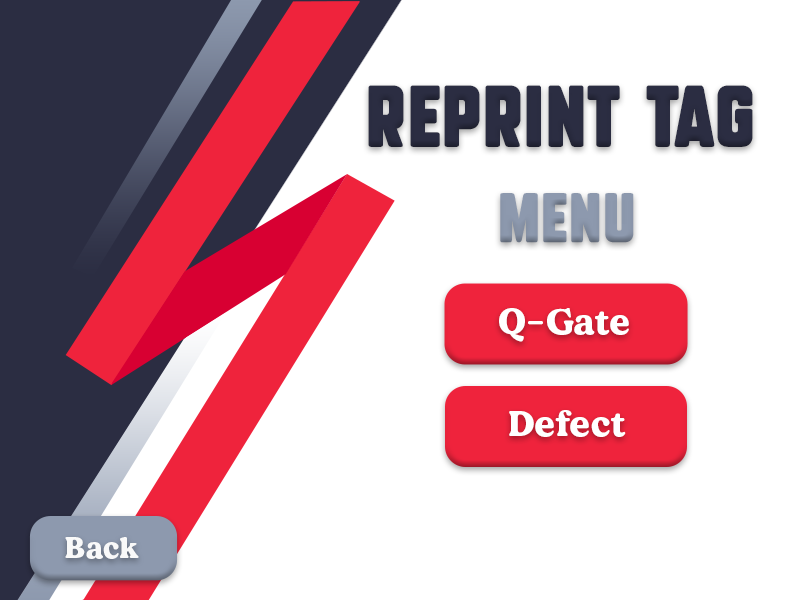
<style>
.page{position:relative;width:800px;height:600px;background:#ffffff}
.page>*{position:absolute;margin:0}
.t1{font:60px "SubtleCurves";letter-spacing:0.025em;color:#2b2d42}
.t2{font:48px "SubtleCurves";letter-spacing:0.025em;color:#8d99ae}
.t3{font:36px "MADEDillan";letter-spacing:0.025em;color:#ffffff}
.t4{font:30px "MADEDillan";letter-spacing:0.025em;color:#f9f9f9}
</style>
<div class="page">
<p class="t1" style="left:368px;top:85px;width:385px;height:62px">reprint tag</p>
<p class="t2" style="left:500px;top:193px;width:134px;height:50px">Menu</p>
<p class="t3" style="left:499px;top:308px;width:130px;height:34px">Q-Gate</p>
<p class="t3" style="left:509px;top:410px;width:117px;height:27px">Defect</p>
<p class="t4" style="left:65px;top:537px;width:74px;height:22px">Back</p>
</div>
